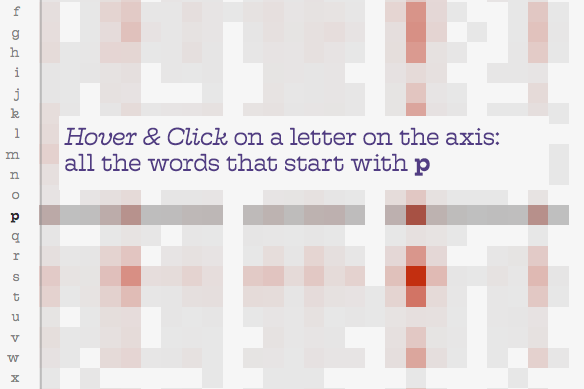
<style>
.page{position:relative;width:584px;height:389px;background:#f6f6f6}
.page>*{position:absolute;margin:0}
.t1{font:24px/26px "Hatch-Light";color:#513c83}
.t2{font:24px/26px "Hatch-LightItalic";color:#513c83}
.t3{font:24px/26px "Hatch-Medium";color:#513c83}
</style>
<div class="page">
<p class="t1" style="left:64px;top:127px;width:436px;height:49px"><span class="t2">Hover &amp; Click </span>on a letter on the axis:<br>all the words that start with <span class="t3">p</span></p>
</div>
